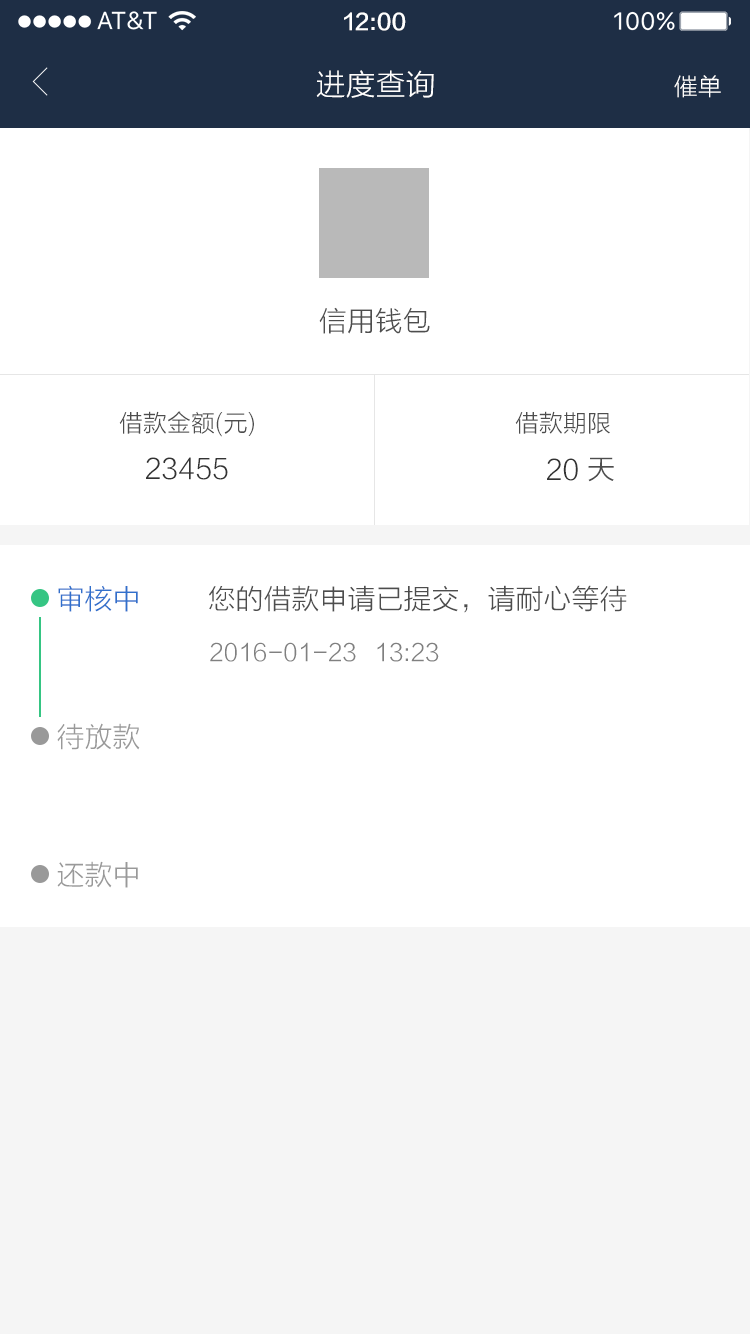
<style>
.page{position:relative;width:750px;height:1334px;background:#ffffff}
.page>*{position:absolute;margin:0}
.t1{font:22px "FZLTZHK--GBK1-0";color:#ffffff}
.t2{font:30px "FZLTXHK";color:#ffffff}
.t3{font:24px "FZLTXHK";color:#ffffff}
.t4{font:28px "FZLTXHK";color:#4d4d4d}
.t5{font:24px "FZLTXHK";color:#4d4d4d}
.t6{font:28px "FZLTXHK";color:#333333}
.t7{font:28px "FZLTXHK";color:#3170cc}
.t8{font:24px "FZLTXHK";color:#808080}
.t9{font:28px "FZLTXHK";color:#999999}
</style>
<div class="page">
<p class="t1" style="left:344px;top:12px;width:62px;height:19px">12:00</p>
<p class="t2" style="left:316px;top:70px;width:118px;height:28px">进度查询</p>
<p class="t3" style="left:674px;top:75px;width:47px;height:23px">催单</p>
<p class="t4" style="left:319px;top:307px;width:111px;height:27px">信用钱包</p>
<p class="t5" style="left:119px;top:411px;width:135px;height:26px">借款金额(元)</p>
<p class="t5" style="left:515px;top:411px;width:95px;height:23px">借款期限</p>
<p class="t6" style="left:146px;top:457px;width:82px;height:23px">23455</p>
<p class="t6" style="left:547px;top:458px;width:31px;height:23px">20</p>
<p class="t4" style="left:588px;top:457px;width:26px;height:25px">天</p>
<p class="t7" style="left:58px;top:585px;width:80px;height:27px">审核中</p>
<p class="t4" style="left:209px;top:585px;width:418px;height:28px">您的借款申请已提交，请耐心等待</p>
<p class="t8" style="left:210px;top:642px;width:146px;height:20px">2016-01-23</p>
<p class="t8" style="left:377px;top:642px;width:62px;height:20px">13:23</p>
<p class="t9" style="left:57px;top:723px;width:83px;height:27px">待放款</p>
<p class="t9" style="left:57px;top:861px;width:81px;height:27px">还款中</p>
</div>
